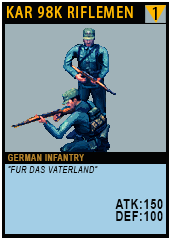
<style>
.page{position:relative;width:170px;height:241px;background:#a0b2b8}
.page>*{position:absolute;margin:0}
.t1{font:15.1px "AdobeHeitiStd-Regular";letter-spacing:0.08em;color:#ffb800;text-transform:uppercase;scale:0.86 1}
.t2{font:17.4px "AdobeHeitiStd-Regular";letter-spacing:0.08em;color:#000000;text-transform:uppercase;scale:0.86 1}
.t3{font:9.3px/12px "Arial-ItalicMT";letter-spacing:0.08em;color:#020100;text-transform:uppercase;scale:0.76 1}
.t4{font:9.3px/20.2px "Arial-BoldMT";letter-spacing:0.08em;color:#b4832c;text-transform:uppercase;scale:0.76 1}
.t5{font:13.9px/12px "Arial-BoldMT";letter-spacing:0.08em;color:#050606;text-transform:uppercase;scale:0.76 1}
</style>
<div class="page">
<p class="t1" style="left:7px;top:6px;width:126px;height:12px">Kar 98k riflemen</p>
<p class="t2" style="left:152px;top:7px;width:5px;height:13px">1</p>
<p class="t3" style="left:8px;top:154px;width:155px;height:67px"><span class="t4">German Infantry<br></span>“Fur das vaterland”<br><br><br><span class="t5">atk:150<br>def:100</span></p>
</div>
